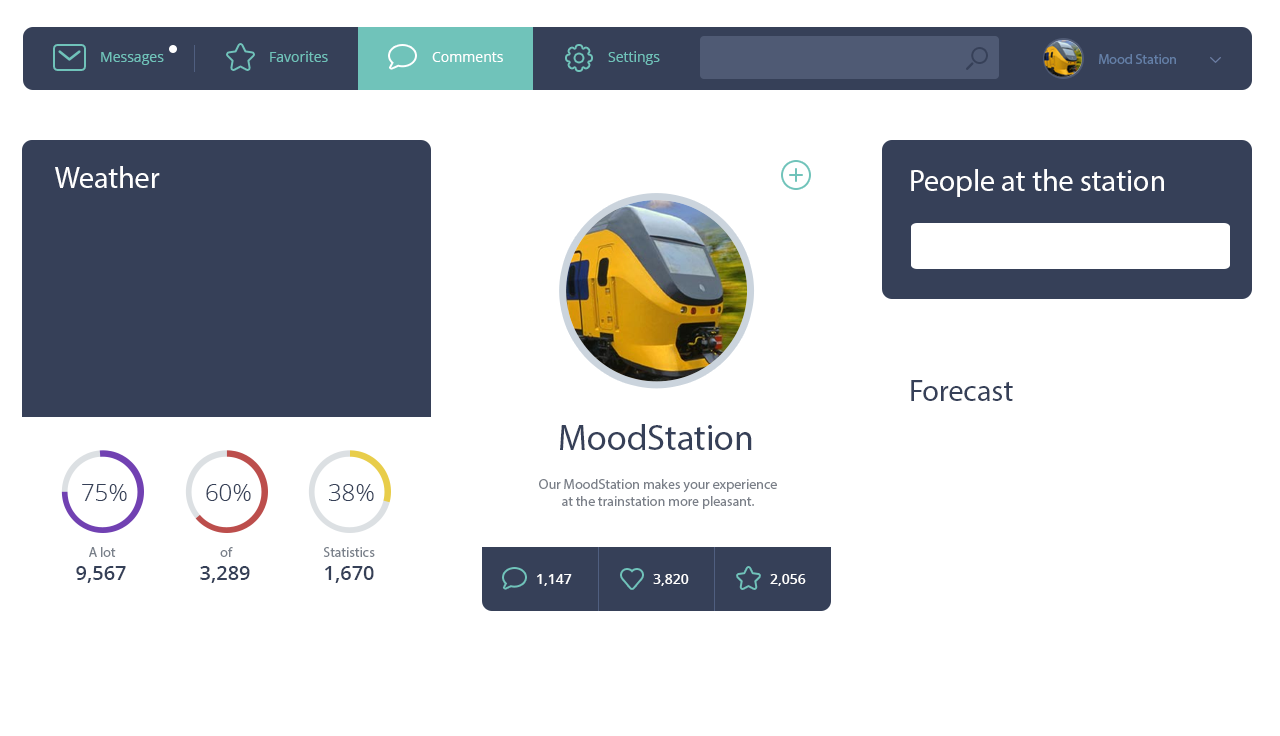
<style>
.page{position:relative;width:1280px;height:736px;background:#ffffff}
.page>*{position:absolute;margin:0}
.t1{font:14px "OpenSans";color:#70c3ba}
.t2{font:14px "OpenSans";color:#ffffff}
.t3{font:14px "MyriadPro-Regular";color:#647fa7}
.t4{font:30px "MyriadPro-Regular";color:#ffffff}
.t5{font:30px "MyriadPro-Regular";color:#364058}
.t6{font:36px "MyriadPro-Regular";color:#364058}
.t7{font:24px "OpenSans-Light";color:#2d3e58}
.t8{font:14px "MyriadPro-Regular";color:#7a7f88}
.t9{font:14px "MyriadPro-Regular";color:#79808a}
.t10{font:20px "OpenSans-Semibold";color:#2d3e58}
.t11{font:14px "OpenSans-Semibold";color:#ffffff}
</style>
<div class="page">
<p class="t1" style="left:101px;top:52px;width:63px;height:13px">Messages</p>
<p class="t1" style="left:270px;top:51px;width:58px;height:11px">Favorites</p>
<p class="t2" style="left:432px;top:52px;width:71px;height:10px">Comments</p>
<p class="t1" style="left:608px;top:51px;width:52px;height:14px">Settings</p>
<p class="t3" style="left:1099px;top:54px;width:77px;height:10px">Mood Station</p>
<p class="t4" style="left:55px;top:166px;width:105px;height:22px">Weather</p>
<p class="t4" style="left:911px;top:169px;width:253px;height:28px">People at the station</p>
<p class="t5" style="left:911px;top:380px;width:102px;height:21px">Forecast</p>
<p class="t6" style="left:560px;top:424px;width:192px;height:26px">MoodStation</p>
<p class="t7" style="left:82px;top:484px;width:45px;height:17px">75%</p>
<p class="t7" style="left:206px;top:484px;width:45px;height:17px">60%</p>
<p class="t7" style="left:329px;top:484px;width:45px;height:17px">38%</p>
<p class="t8" style="left:539px;top:479px;width:238px;height:30px;text-align:center">Our MoodStation makes your experience<br>at the trainstation more pleasant.</p>
<p class="t9" style="left:89px;top:547px;width:27px;height:10px">A lot</p>
<p class="t9" style="left:220px;top:547px;width:13px;height:10px">of</p>
<p class="t9" style="left:323px;top:547px;width:52px;height:10px">Statistics</p>
<p class="t10" style="left:76px;top:566px;width:50px;height:17px">9,567</p>
<p class="t10" style="left:200px;top:566px;width:50px;height:17px">3,289</p>
<p class="t10" style="left:325px;top:566px;width:49px;height:17px">1,670</p>
<p class="t11" style="left:537px;top:574px;width:35px;height:12px">1,147</p>
<p class="t11" style="left:653px;top:574px;width:36px;height:12px">3,820</p>
<p class="t11" style="left:770px;top:574px;width:36px;height:12px">2,056</p>
</div>
